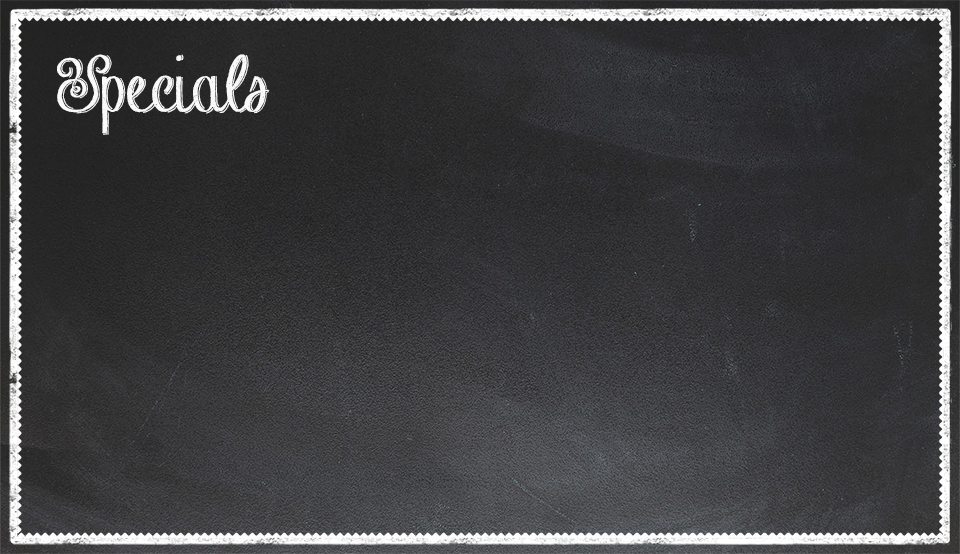
<style>
.page{position:relative;width:960px;height:554px}
.page>*{position:absolute;margin:0}
.t1{font:72px "Chalk-hand-lettering-shaded_demo";color:#fafafa}
</style>
<div class="page">
<p class="t1" style="left:57px;top:54px;width:213px;height:81px">Specials</p>
</div>
